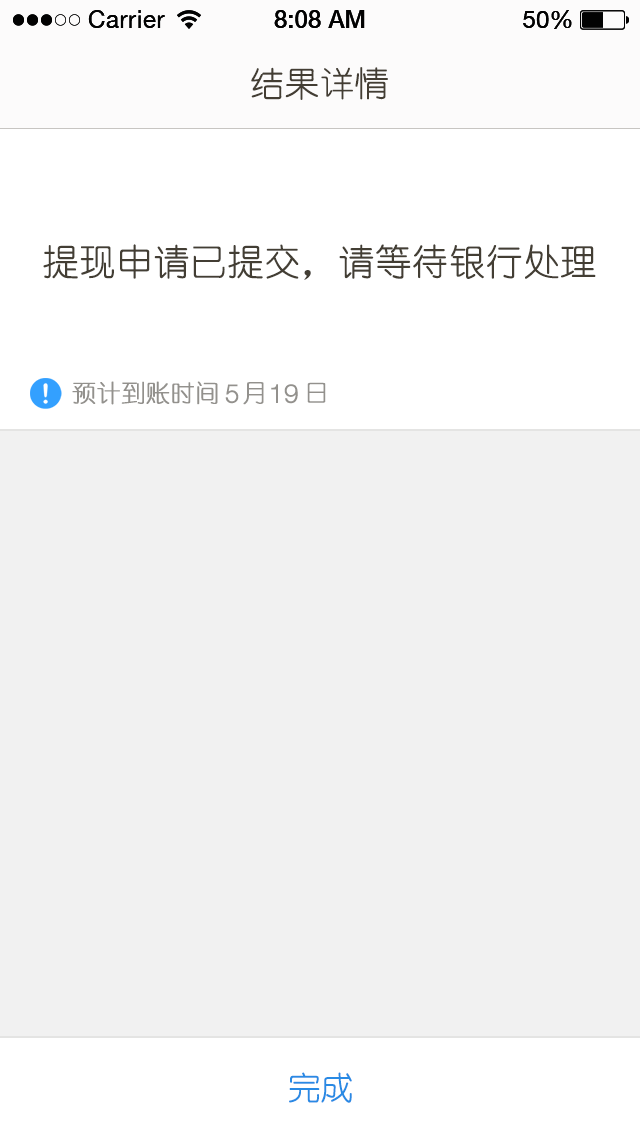
<style>
.page{position:relative;width:640px;height:1136px;background:#f1f1f1}
.page>*{position:absolute;margin:0}
.t1{font:34px "YouYuan";color:#433d33;text-transform:uppercase;font-weight:bold}
.t2{font:36px "YouYuan";color:#433e34;text-transform:uppercase;font-weight:bold}
.t3{font:24px "YouYuan";color:#93918d;text-transform:uppercase;font-weight:bold}
.t4{font:26px "HelveticaNeueLTPro-Lt";color:#93918d;text-transform:uppercase;font-weight:bold}
.t5{font:32px "YouYuan";color:#298ae4;text-transform:uppercase;font-weight:bold}
</style>
<div class="page">
<p class="t1" style="left:251px;top:67px;width:137px;height:33px">结果详情</p>
<p class="t2" style="left:43px;top:244px;width:553px;height:36px">提现申请已提交，请等待银行处理</p>
<p class="t3" style="left:72px;top:381px;width:146px;height:24px">预计到账时间</p>
<p class="t4" style="left:225px;top:384px;width:14px;height:20px">5</p>
<p class="t3" style="left:243px;top:382px;width:21px;height:23px">月</p>
<p class="t4" style="left:271px;top:384px;width:27px;height:20px">19</p>
<p class="t3" style="left:307px;top:382px;width:19px;height:21px">日</p>
<p class="t5" style="left:289px;top:1072px;width:63px;height:31px">完成</p>
</div>
